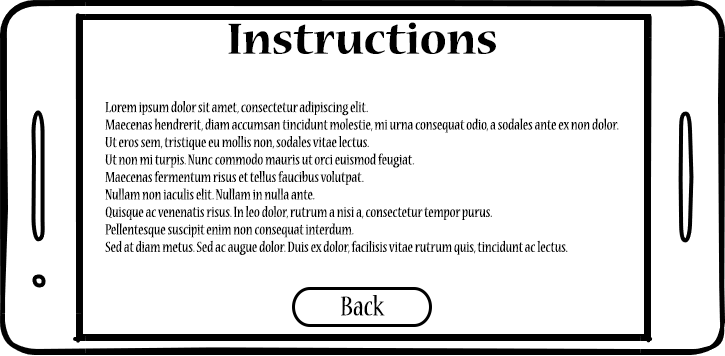
<style>
.page{position:relative;width:725px;height:356px;background:#ffffff}
.page>*{position:absolute;margin:0}
.t1{font:48px "NuevaStd-Bold";color:#000000}
.t2{font:16px/17.5px "NuevaStd-Cond";color:#000000}
.t3{font:30px "NuevaStd-Cond";color:#000000}
</style>
<div class="page">
<p class="t1" style="left:228px;top:22px;width:268px;height:32px">Instructions</p>
<p class="t2" style="left:105px;top:101px;width:514px;height:154px">Lorem ipsum dolor sit amet, consectetur adipiscing elit. <br>Maecenas hendrerit, diam accumsan tincidunt molestie, mi urna consequat odio, a sodales ante ex non dolor.<br>Ut eros sem, tristique eu mollis non, sodales vitae lectus.<br>Ut non mi turpis. Nunc commodo mauris ut orci euismod feugiat.<br>Maecenas fermentum risus et tellus faucibus volutpat.<br>Nullam non iaculis elit. Nullam in nulla ante.<br>Quisque ac venenatis risus. In leo dolor, rutrum a nisi a, consectetur tempor purus.<br>Pellentesque suscipit enim non consequat interdum.<br>Sed at diam metus. Sed ac augue dolor. Duis ex dolor, facilisis vitae rutrum quis, tincidunt ac lectus.</p>
<p class="t3" style="left:340px;top:295px;width:45px;height:21px">Back</p>
</div>
